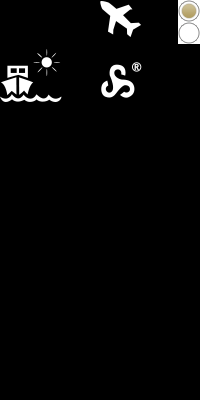
<style>
.page{position:relative;width:200px;height:400px;background:#000000}
.page>*{position:absolute;margin:0}
.t1{font:8.6px "SimHei";color:#ffffff}
</style>
<div class="page">
<p class="t1" style="left:134px;top:64px;width:5px;height:6px">R</p>
</div>
